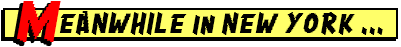
<style>
.page{position:relative;width:401px;height:47px;background:#000000}
.page>*{position:absolute;margin:0}
.t1{font:40px "Crang";letter-spacing:0.05em;color:#ff0000;font-style:italic}
.t2{font:20px "Crang";letter-spacing:0.075em;color:#000000;font-style:italic}
</style>
<div class="page">
<p class="t1" style="left:17px;top:1px;width:44px;height:41px">M</p>
<p class="t2" style="left:59px;top:11px;width:324px;height:24px">EANWHILE in NEW YORK ...</p>
</div>
